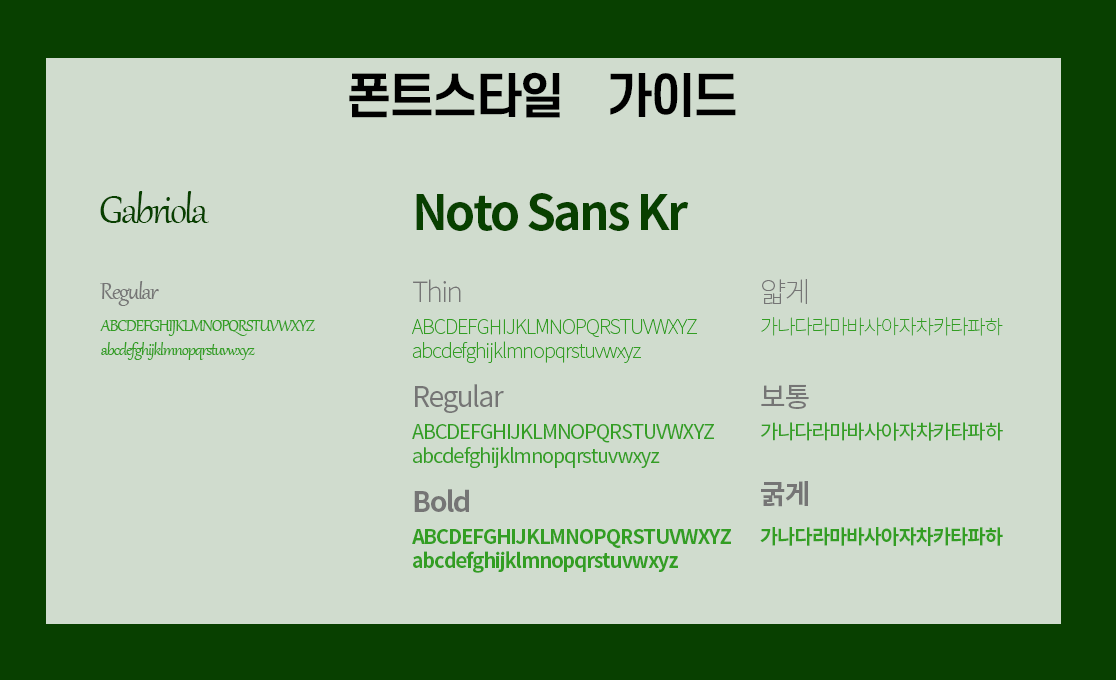
<style>
.page{position:relative;width:1116px;height:680px;background:#d0dcce}
.page>*{position:absolute;margin:0}
.t1{font:48px "S-CoreDream-6Bold";letter-spacing:-0.055em;color:#000000}
.t2{font:48px "Gabriola";letter-spacing:-0.055em;color:#084000}
.t3{font:48px "NotoSansKR-Bold";letter-spacing:-0.055em;color:#084000}
.t4{font:28px "Gabriola";letter-spacing:-0.055em;color:#757575}
.t5{font:28px "NotoSansKR-Thin";letter-spacing:-0.055em;color:#757575}
.t6{font:20px "NotoSansKR-Thin";letter-spacing:-0.055em;color:#339e23}
.t7{font:20px/24px "Gabriola";letter-spacing:-0.055em;color:#339e23}
.t8{font:20px/24px "NotoSansKR-Thin";letter-spacing:-0.055em;color:#339e23}
.t9{font:28px "NotoSansKR-Regular";letter-spacing:-0.055em;color:#757575}
.t10{font:20px/24px "NotoSansKR-Regular";letter-spacing:-0.055em;color:#339e23}
.t11{font:20px "NotoSansKR-Regular";letter-spacing:-0.055em;color:#339e23}
.t12{font:28px "NotoSansKR-Bold";letter-spacing:-0.055em;color:#757575}
.t13{font:20px/24px "NotoSansKR-Bold";letter-spacing:-0.055em;color:#339e23}
.t14{font:20px "NotoSansKR-Bold";letter-spacing:-0.055em;color:#339e23}
</style>
<div class="page">
<p class="t1" style="left:349px;top:72px;width:387px;height:46px">폰트스타일　가이드</p>
<p class="t2" style="left:100px;top:191px;width:109px;height:32px">Gabriola</p>
<p class="t3" style="left:416px;top:193px;width:273px;height:38px">Noto Sans Kr</p>
<p class="t4" style="left:100px;top:281px;width:59px;height:25px">Regular</p>
<p class="t5" style="left:413px;top:279px;width:48px;height:23px">Thin</p>
<p class="t5" style="left:762px;top:279px;width:45px;height:25px">얇게</p>
<p class="t6" style="left:761px;top:317px;width:242px;height:19px">가나다라마바사아자차카타파하</p>
<p class="t7" style="left:100px;top:320px;width:215px;height:40px">ABCDEFGHIJKLMNOPQRSTUVWXYZ<br>abcdefghijklmnopqrstuvwxyz</p>
<p class="t8" style="left:412px;top:319px;width:285px;height:44px">ABCDEFGHIJKLMNOPQRSTUVWXYZ<br>abcdefghijklmnopqrstuvwxyz</p>
<p class="t9" style="left:415px;top:384px;width:89px;height:29px">Regular</p>
<p class="t9" style="left:761px;top:384px;width:48px;height:25px">보통</p>
<p class="t10" style="left:412px;top:424px;width:302px;height:44px">ABCDEFGHIJKLMNOPQRSTUVWXYZ<br>abcdefghijklmnopqrstuvwxyz</p>
<p class="t11" style="left:761px;top:422px;width:242px;height:19px">가나다라마바사아자차카타파하</p>
<p class="t12" style="left:761px;top:481px;width:47px;height:26px">굵게</p>
<p class="t12" style="left:414px;top:489px;width:55px;height:23px">Bold</p>
<p class="t13" style="left:412px;top:529px;width:319px;height:44px">ABCDEFGHIJKLMNOPQRSTUVWXYZ<br>abcdefghijklmnopqrstuvwxyz</p>
<p class="t14" style="left:760px;top:527px;width:243px;height:19px">가나다라마바사아자차카타파하</p>
</div>
